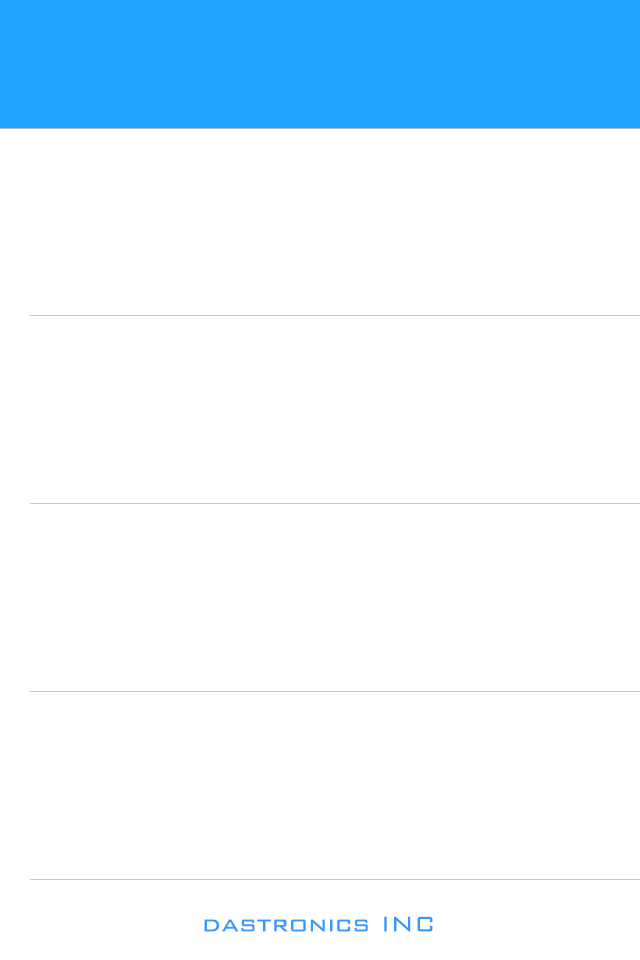
<style>
.page{position:relative;width:640px;height:960px;background:#ffffff}
.page>*{position:absolute;margin:0}
.t1{font:47.6px "BankGothic-Light";color:#3399ff}
</style>
<div class="page">
<p class="t1" style="left:204px;top:916px;width:229px;height:16px">dastronics INC</p>
</div>
